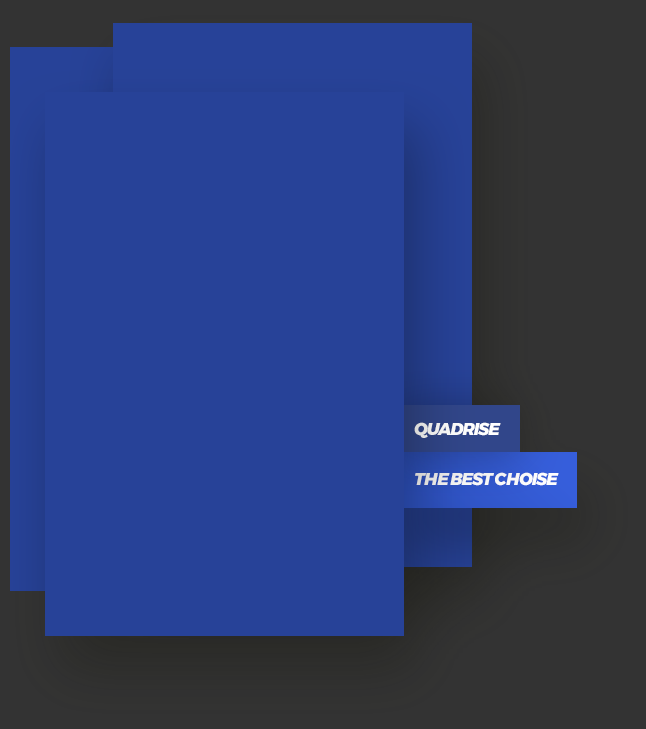
<style>
.page{position:relative;width:646px;height:729px;background:#274298}
.page>*{position:absolute;margin:0}
.t1{font:17px "Montserrat-ExtraBoldItalic";letter-spacing:-0.06em;color:#ffffff;text-transform:uppercase}
</style>
<div class="page">
<p class="t1" style="left:414px;top:422px;width:87px;height:16px">quadrise</p>
<p class="t1" style="left:415px;top:472px;width:144px;height:14px">the best choise</p>
</div>
